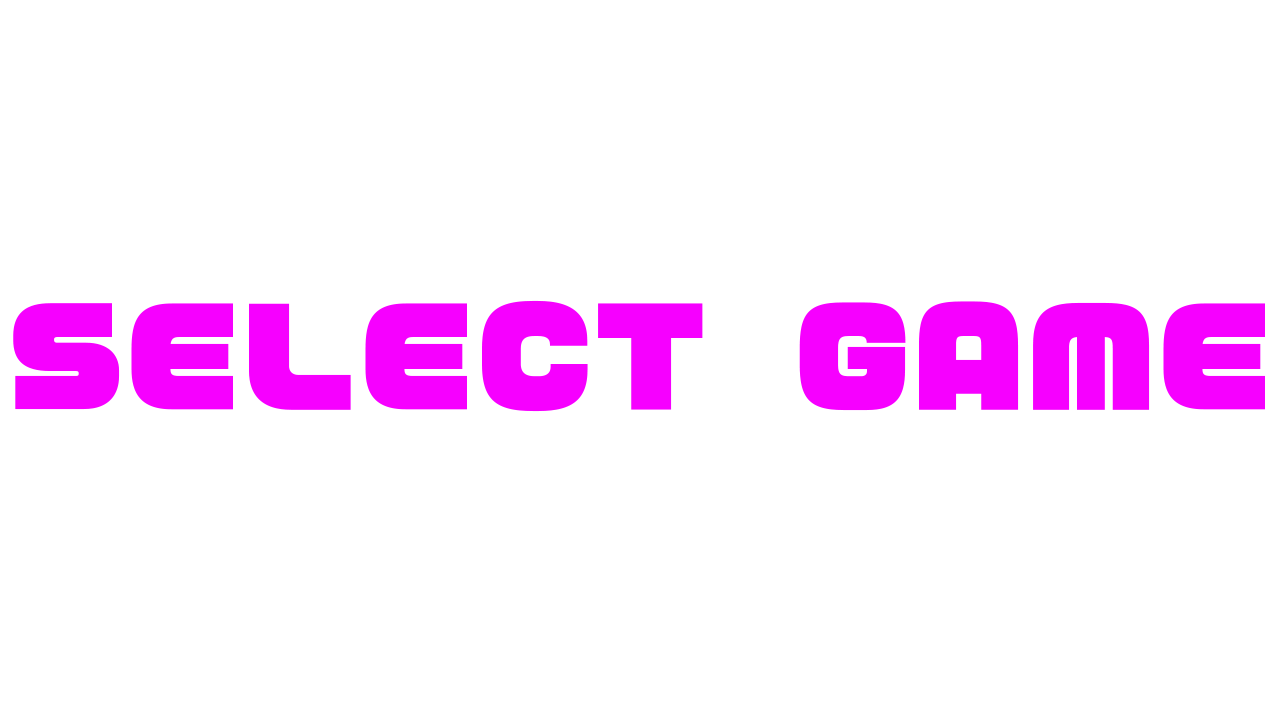
<style>
.page{position:relative;width:1280px;height:720px;background:#ffffff}
.page>*{position:absolute;margin:0}
.t1{font:130px "VDL-LogoJrBlack-Black";color:#f600ff}
</style>
<div class="page">
<p class="t1" style="left:13px;top:300px;width:1252px;height:112px">SELECT  GAME</p>
</div>
